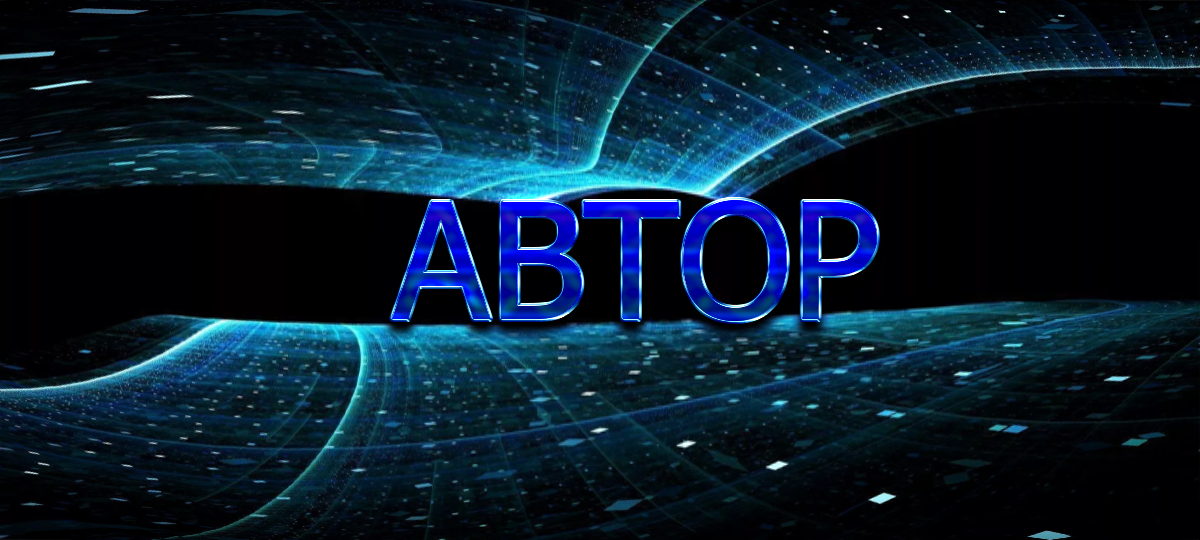
<style>
.page{position:relative;width:1200px;height:540px}
.page>*{position:absolute;margin:0}
.t1{font:160.5px "Tahoma"}
</style>
<div class="page">
<p class="t1" style="left:392px;top:200px;width:485px;height:121px">АВТОР</p>
<p class="t1" style="left:392px;top:201px;width:485px;height:120px">АВТОР</p>
</div>
